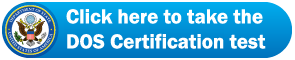
<style>
.page{position:relative;width:295px;height:60px;background:#ffffff}
.page>*{position:absolute;margin:0}
.t1{font:20.8px "FranklinGothic-Demi";color:#ffffff}
</style>
<div class="page">
<p class="t1" style="left:66px;top:9px;width:200px;height:40px">Click here to take the<br>DOS Certification test</p>
</div>
